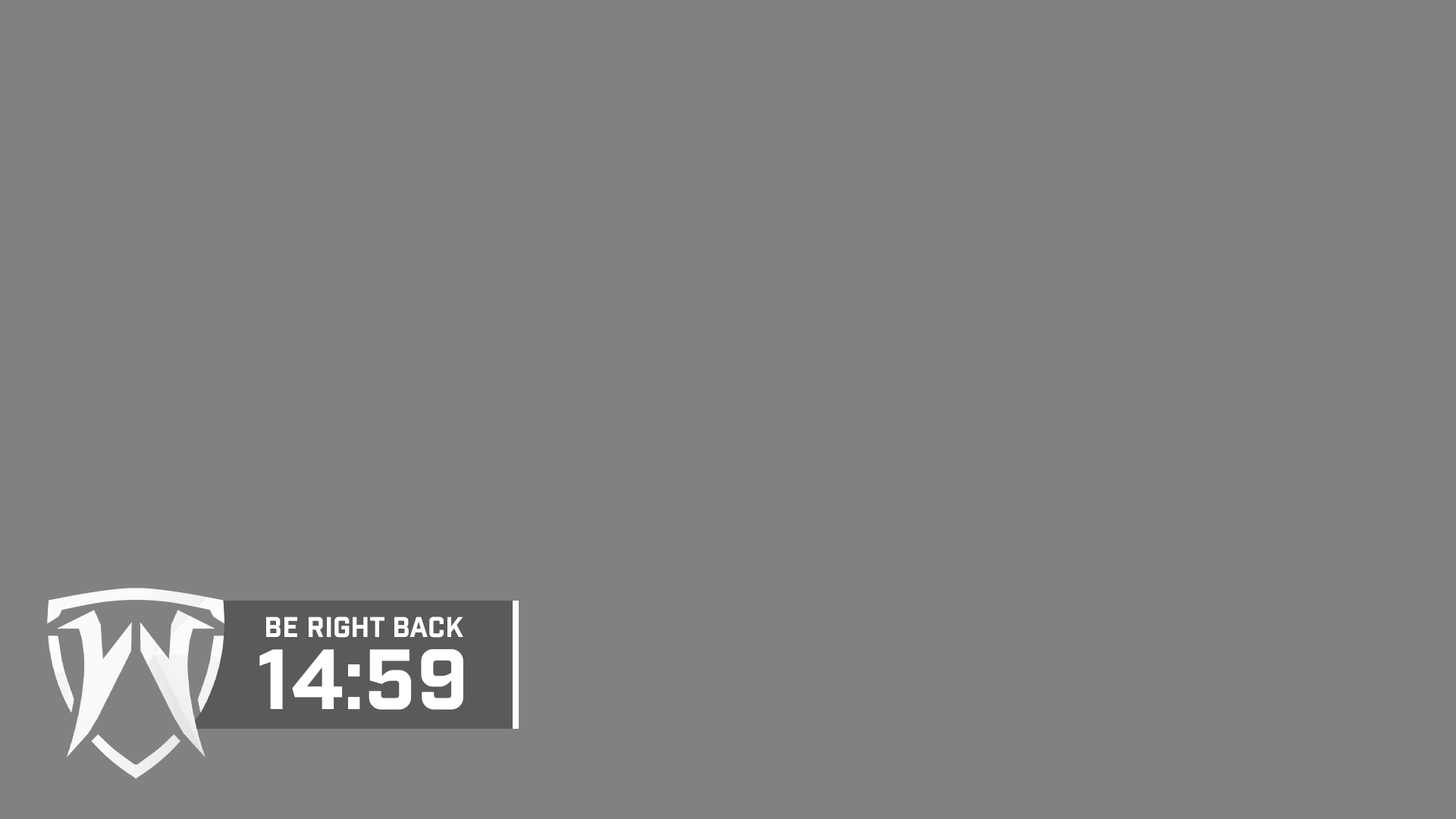
<style>
.page{position:relative;width:1456px;height:819px;background:#818181}
.page>*{position:absolute;margin:0}
.t1{font:27.7px "Industry-Bold";color:#ffffff}
.t2{font:82.4px "Industry-Bold";color:#ffffff}
</style>
<div class="page">
<p class="t1" style="left:266px;top:617px;width:197px;height:21px">BE RIGHT BACK</p>
<p class="t2" style="left:259px;top:649px;width:204px;height:61px">14:59</p>
</div>
